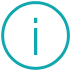
<style>
.page{position:relative;width:72px;height:72px;background:#ffffff}
.page>*{position:absolute;margin:0}
.t1{font:52.4px "HelveticaNeue-Light";color:#10a8ae}
</style>
<div class="page">
<p class="t1" style="left:34px;top:17px;width:4px;height:38px">i</p>
</div>
